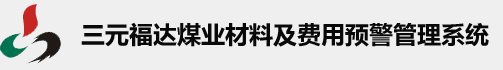
<style>
.page{position:relative;width:503px;height:70px;background:#efefef}
.page>*{position:absolute;margin:0}
.t1{font:24px "MicrosoftYaHei-Bold";color:#090909}
</style>
<div class="page">
<p class="t1" style="left:81px;top:22px;width:408px;height:25px">三元福达煤业材料及费用预警管理系统</p>
</div>
